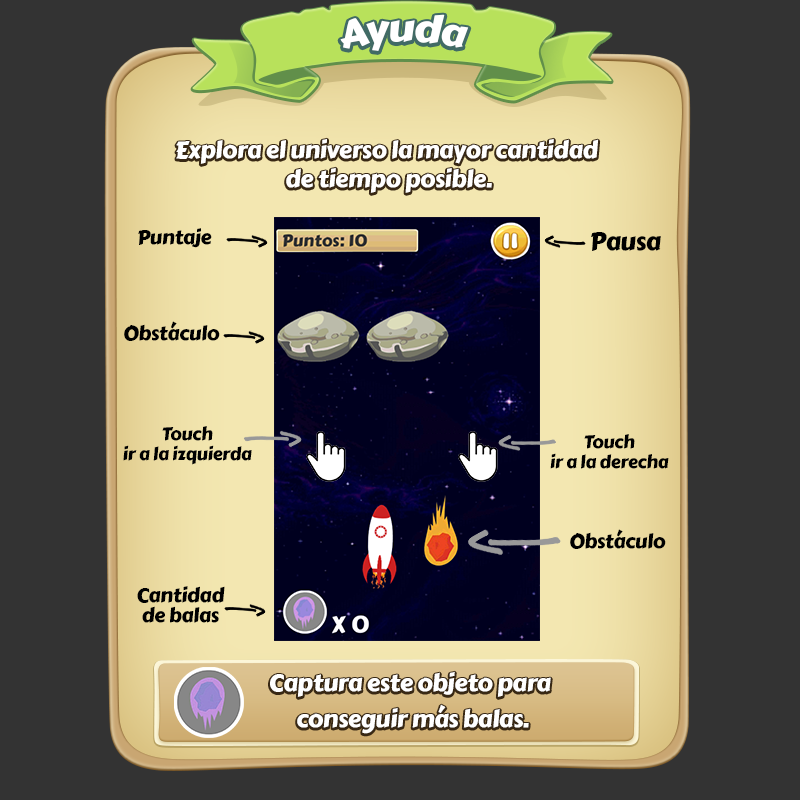
<style>
.page{position:relative;width:800px;height:800px;background:#333333}
.page>*{position:absolute;margin:0}
.t1{font:38px "CarterOne";letter-spacing:-0.02em;color:#ffffff}
.t2{font:24px "CarterOne";letter-spacing:-0.02em;color:#ffffff}
.t3{font:20px "CarterOne";letter-spacing:-0.02em;color:#000000}
.t4{font:25.2px "CarterOne";letter-spacing:-0.02em;color:#000000}
.t5{font:18px/20px "CarterOne";letter-spacing:-0.02em;color:#000000}
.t6{font:20px/20px "CarterOne";letter-spacing:-0.02em;color:#000000}
.t7{font:24px/36.2px "CarterOne";letter-spacing:-0.02em;color:#ffffff}
</style>
<div class="page">
<p class="t1" style="left:340px;top:14px;width:129px;height:37px">Ayuda</p>
<p class="t2" style="left:176px;top:138px;width:423px;height:55px;text-align:center">Explora el universo la mayor cantidad <br>de tiempo posible.</p>
<p class="t3" style="left:138px;top:228px;width:74px;height:20px">Puntaje</p>
<p class="t4" style="left:591px;top:232px;width:70px;height:19px">Pausa</p>
<p class="t3" style="left:124px;top:321px;width:96px;height:20px">Obstáculo</p>
<p class="t5" style="left:123px;top:426px;width:129px;height:39px;text-align:center">Touch<br>ir a la izquierda</p>
<p class="t5" style="left:550px;top:434px;width:119px;height:35px;text-align:center">Touch<br>ir a la derecha</p>
<p class="t3" style="left:570px;top:529px;width:96px;height:20px">Obstáculo</p>
<p class="t6" style="left:137px;top:586px;width:88px;height:37px;text-align:center">Cantidad<br>de balas</p>
<p class="t7" style="left:270px;top:671px;width:281px;height:63px;text-align:center">Captura este objeto para  <br>conseguir más balas.</p>
</div>
